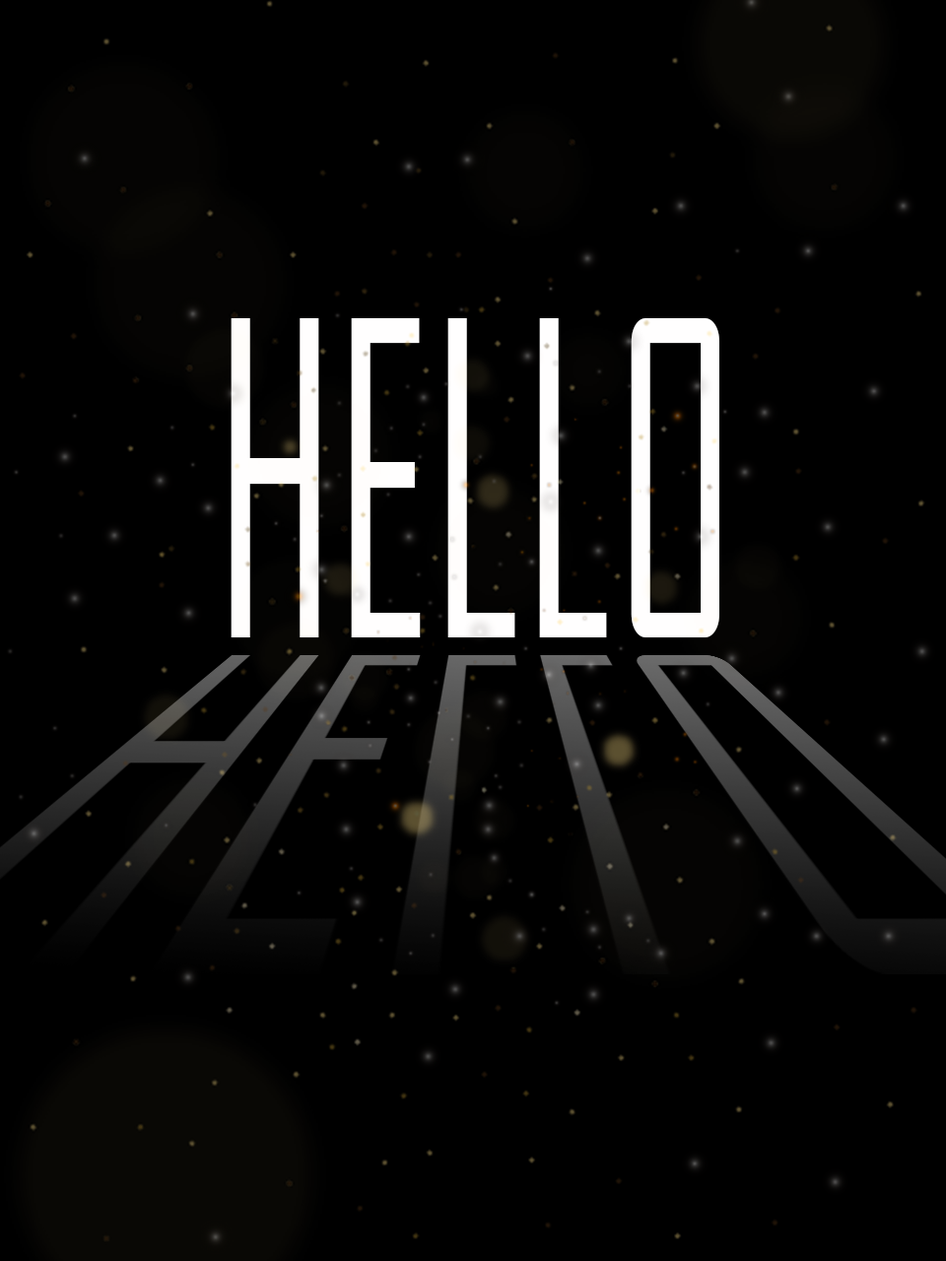
<style>
.page{position:relative;width:946px;height:1261px;background:#000000}
.page>*{position:absolute;margin:0}
.t1{font:417.7px "AgencyFB-Reg";color:#fffefe;scale:0.65 1}
</style>
<div class="page">
<p class="t1" style="left:231px;top:318px;width:488px;height:319px">HELLO</p>
</div>
